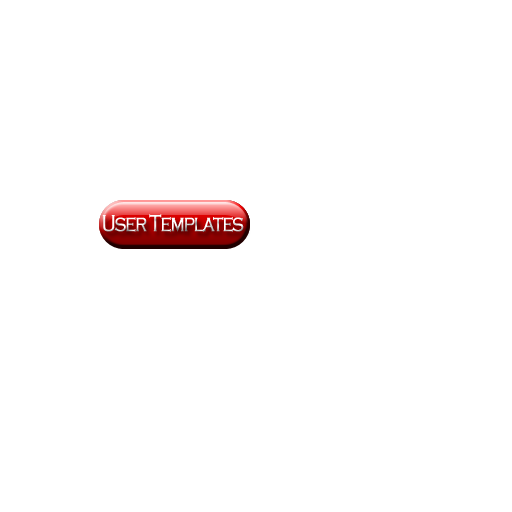
<style>
.page{position:relative;width:512px;height:512px;background:#ffffff}
.page>*{position:absolute;margin:0}
.t1{font:24px "CopperplateGothic-Light";letter-spacing:-0.08em;font-weight:bold;scale:0.76 1}
</style>
<div class="page">
<p class="t1" style="left:102px;top:214px;width:142px;height:18px">User Templates</p>
</div>
